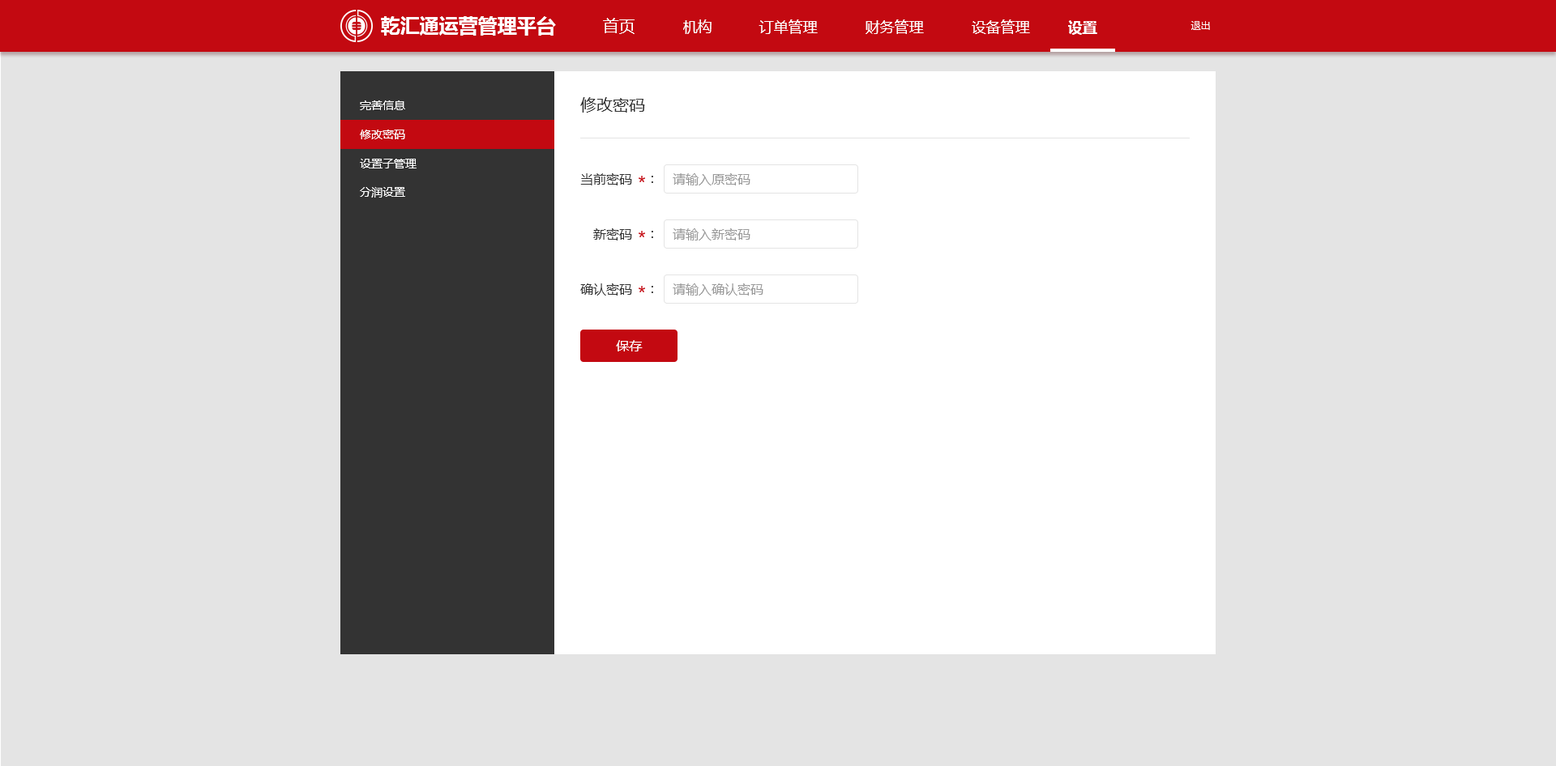
<style>
.page{position:relative;width:1556px;height:766px;background:#e4e4e4}
.page>*{position:absolute;margin:0}
.t1{font:19.4px "MicrosoftYaHei-Bold";color:#ffffff}
.t2{font:16.2px "MicrosoftYaHei";color:#ffffff}
.t3{font:14.6px "MicrosoftYaHei";color:#ffffff}
.t4{font:14.6px "MicrosoftYaHei-Bold";color:#ffffff}
.t5{font:9.7px "MicrosoftYaHei";color:#ffffff}
.t6{font:11.3px "MicrosoftYaHei";color:#ffffff}
.t7{font:16.2px "MicrosoftYaHei";color:#333333}
.t8{font:13px "MicrosoftYaHei";color:#333333}
.t9{font:13px "MicrosoftYaHei";color:#999999}
.t10{font:13px "MicrosoftYaHei";color:#ffffff}
</style>
<div class="page">
<p class="t1" style="left:381px;top:16px;width:175px;height:20px">乾汇通运营管理平台</p>
<p class="t2" style="left:603px;top:18px;width:31px;height:16px">首页</p>
<p class="t3" style="left:683px;top:19px;width:28px;height:15px">机构</p>
<p class="t3" style="left:758px;top:19px;width:60px;height:15px">订单管理</p>
<p class="t3" style="left:865px;top:19px;width:59px;height:15px">财务管理</p>
<p class="t3" style="left:971px;top:19px;width:59px;height:15px">设备管理</p>
<p class="t4" style="left:1068px;top:20px;width:29px;height:15px">设置</p>
<p class="t5" style="left:1190px;top:21px;width:20px;height:9px">退出</p>
<p class="t6" style="left:360px;top:100px;width:45px;height:10px">完善信息</p>
<p class="t7" style="left:580px;top:97px;width:65px;height:16px">修改密码</p>
<p class="t6" style="left:360px;top:130px;width:45px;height:9px">修改密码</p>
<p class="t6" style="left:360px;top:159px;width:56px;height:10px">设置子管理</p>
<p class="t8" style="left:580px;top:173px;width:52px;height:13px">当前密码</p>
<p class="t9" style="left:673px;top:173px;width:77px;height:13px">请输入原密码</p>
<p class="t8" style="left:651px;top:176px;width:2px;height:7px">:</p>
<p class="t6" style="left:360px;top:187px;width:45px;height:11px">分润设置</p>
<p class="t8" style="left:593px;top:228px;width:39px;height:13px">新密码</p>
<p class="t8" style="left:651px;top:231px;width:2px;height:7px">:</p>
<p class="t9" style="left:673px;top:228px;width:77px;height:13px">请输入新密码</p>
<p class="t8" style="left:580px;top:284px;width:52px;height:12px">确认密码</p>
<p class="t8" style="left:651px;top:286px;width:2px;height:7px">:</p>
<p class="t9" style="left:673px;top:284px;width:90px;height:12px">请输入确认密码</p>
<p class="t10" style="left:616px;top:340px;width:27px;height:12px">保存</p>
</div>
